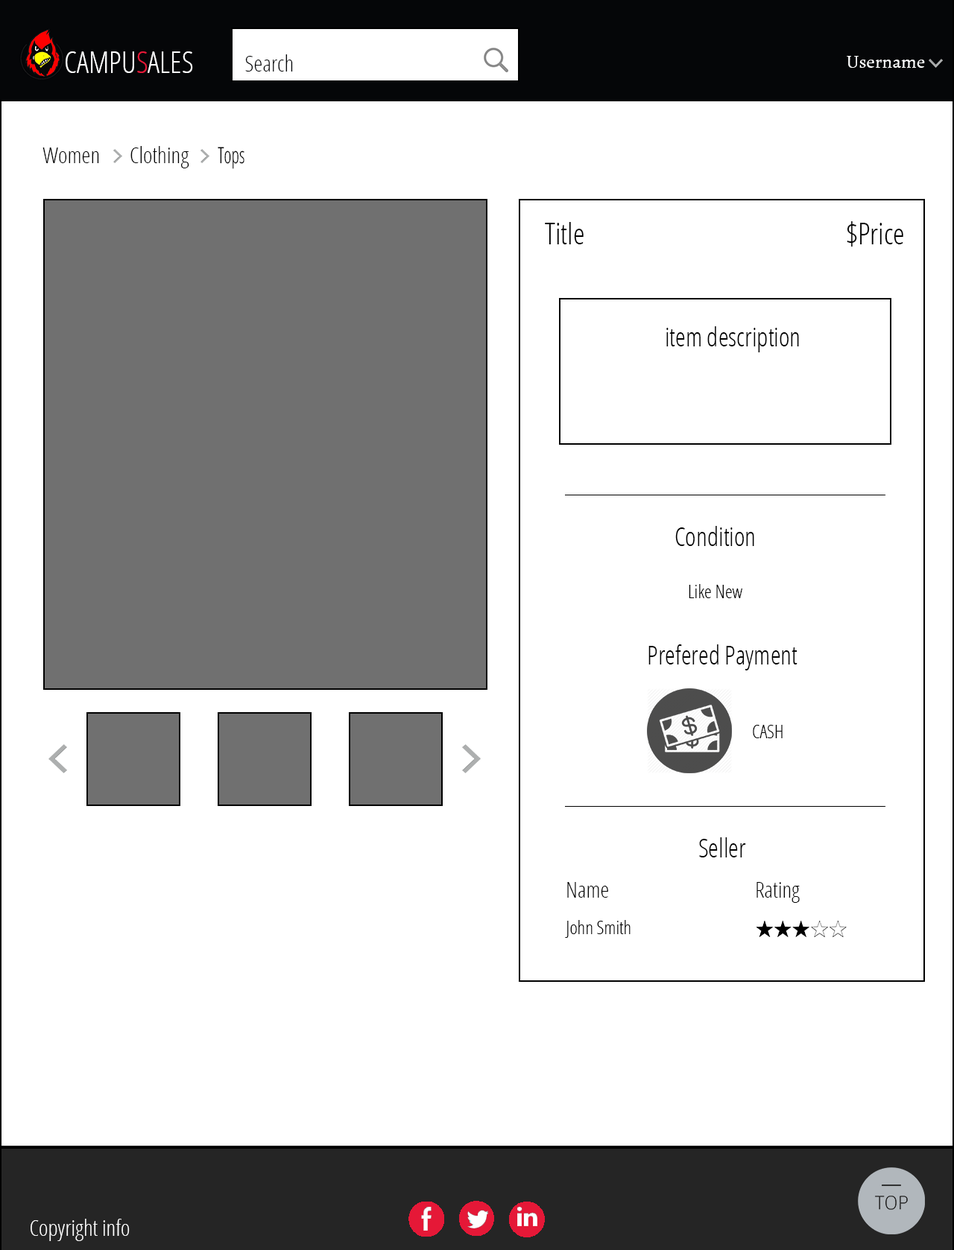
<style>
.page{position:relative;width:954px;height:1250px;background:#ffffff}
.page>*{position:absolute;margin:0}
.t1{font:29.8px "OpenSans-CondensedLight";color:#fefeff;text-transform:uppercase}
.t2{font:29.8px "OpenSans-CondensedLight";color:#e51837;text-transform:uppercase}
.t3{font:22.4px "OpenSans-CondensedLight";color:#050608}
.t4{font:18.6px "Alegreya-Regular";color:#ffffff}
.t5{font:22.4px "OpenSans-CondensedLight";color:#000000}
.t6{font:22.4px "OpenSans-CondensedLight";color:#000000;scale:0.8 1}
.t7{font:29.8px "OpenSans-CondensedLight";color:#000000}
.t8{font:26.1px "OpenSans-CondensedLight";color:#000000}
.t9{font:18.6px "OpenSans-CondensedLight";color:#000000}
.t10{font:22.4px "OpenSans-CondensedLight";color:#ffffff}
</style>
<div class="page">
<p class="t1" style="left:66px;top:51px;width:127px;height:22px">Campu<span class="t2">s</span>ales</p>
<p class="t3" style="left:245px;top:54px;width:48px;height:18px">Search</p>
<p class="t4" style="left:846px;top:56px;width:79px;height:13px">Username</p>
<p class="t5" style="left:42px;top:148px;width:57px;height:15px">Women</p>
<p class="t5" style="left:130px;top:146px;width:59px;height:22px">Clothing</p>
<p class="t6" style="left:218px;top:147px;width:26px;height:22px">Tops</p>
<p class="t7" style="left:846px;top:221px;width:57px;height:26px">$Price</p>
<p class="t7" style="left:545px;top:222px;width:38px;height:22px">Title</p>
<p class="t8" style="left:666px;top:326px;width:133px;height:26px">item description</p>
<p class="t8" style="left:675px;top:526px;width:79px;height:20px">Condition</p>
<p class="t9" style="left:688px;top:584px;width:54px;height:14px">Like New</p>
<p class="t8" style="left:648px;top:645px;width:149px;height:26px">Prefered Payment</p>
<p class="t9" style="left:753px;top:725px;width:29px;height:13px">CASH</p>
<p class="t8" style="left:699px;top:837px;width:47px;height:21px">Seller</p>
<p class="t5" style="left:567px;top:882px;width:41px;height:16px">Name</p>
<p class="t5" style="left:756px;top:882px;width:43px;height:21px">Rating</p>
<p class="t9" style="left:565px;top:920px;width:65px;height:18px">John Smith</p>
<p class="t10" style="left:31px;top:1219px;width:99px;height:22px">Copyright info</p>
</div>
